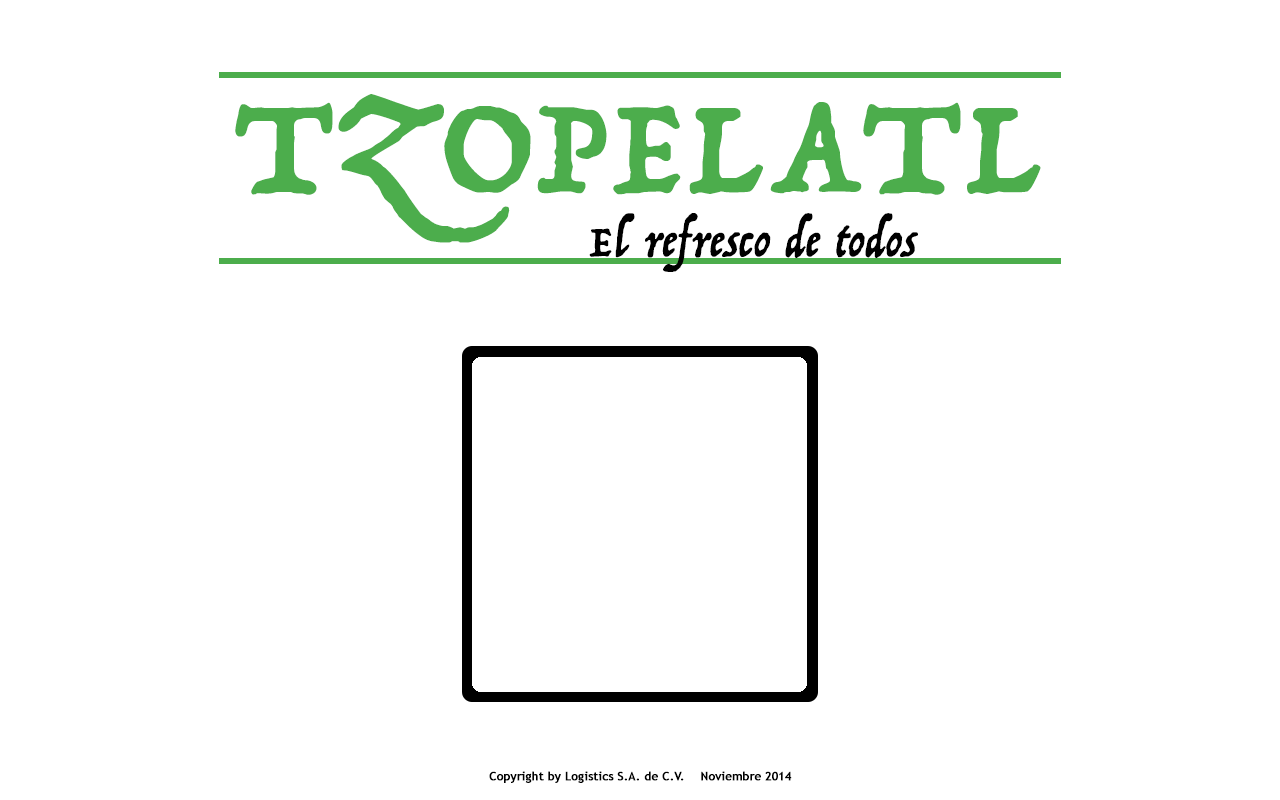
<style>
.page{position:relative;width:1280px;height:800px;background:#ffffff}
.page>*{position:absolute;margin:0}
.t1{font:150px "Trattatello";color:#4cad4c;font-weight:bold}
.t2{font:48px "Trattatello";color:#000000;font-weight:bold}
.t3{font:12px "TrebuchetMS";color:#000000;font-weight:bold}
</style>
<div class="page">
<p class="t1" style="left:235px;top:94px;width:806px;height:149px">TZOPELATL</p>
<p class="t2" style="left:589px;top:213px;width:329px;height:59px">El refresco de todos</p>
<p class="t3" style="left:489px;top:771px;width:303px;height:12px">Copyright by Logistics S.A. de C.V.    Noviembre 2014</p>
</div>
